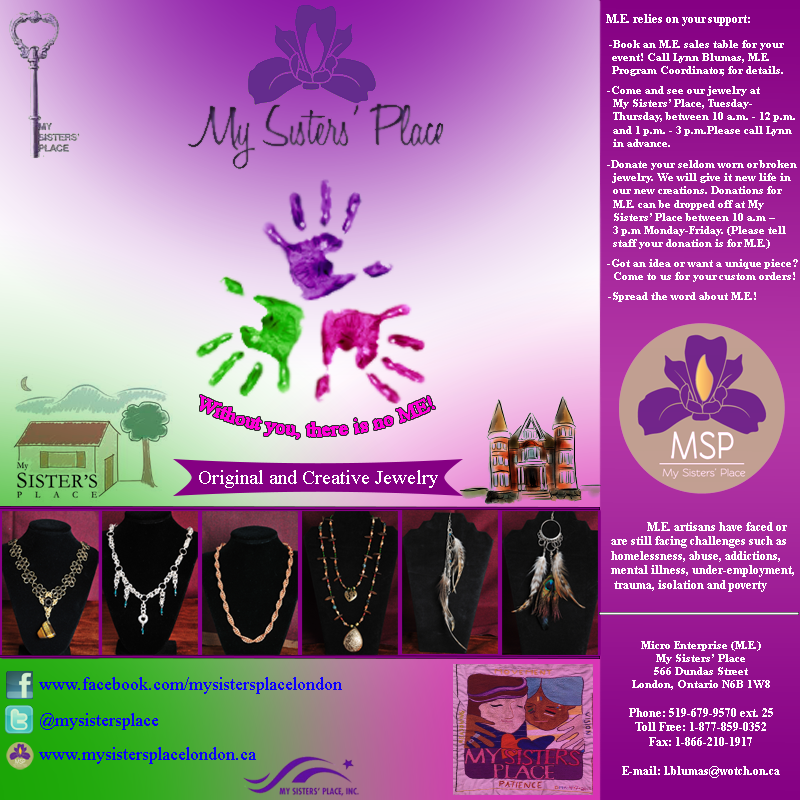
<style>
.page{position:relative;width:800px;height:800px}
.page>*{position:absolute;margin:0}
.t1{font:12px "TimesNewRomanPS-BoldMT";color:#ffffff}
.t2{font:11px "TimesNewRomanPS-BoldMT";color:#ffffff}
.t3{font:20px "TimesNewRomanPSMT";color:#ff00d8}
.t4{font:20px "TimesNewRomanPSMT";color:#ffffff}
.t5{font:18px "TimesNewRomanPSMT";color:#0c00ff}
</style>
<div class="page">
<p class="t1" style="left:606px;top:14px;width:144px;height:12px">M.E. relies on your support:</p>
<p class="t2" style="left:609px;top:40px;width:175px;height:36px">-Book an M.E. sales table for your<br> event! Call Lynn Blumas, M.E. <br> Program Coordinator, for details.</p>
<p class="t2" style="left:607px;top:86px;width:188px;height:61px">-Come and see our jewelry at <br>  My Sisters’ Place, Tuesday-<br>  Thursday, between 10 a.m. - 12 p.m. <br>  and 1 p.m. - 3 p.m.Please call Lynn <br>  in advance.</p>
<p class="t2" style="left:607px;top:160px;width:190px;height:89px">-Donate your seldom worn or broken<br>  jewelry. We will give it new life in <br>  our new creations. Donations for <br>  M.E. can be dropped off at My <br>  Sisters’ Place between 10 a.m – <br>  3 p.m Monday-Friday. (Please tell <br>  staff your donation is for M.E.)</p>
<p class="t2" style="left:607px;top:259px;width:191px;height:23px">-Got an idea or want a unique piece?<br>  Come to us for your custom orders!</p>
<p class="t2" style="left:608px;top:292px;width:148px;height:10px">-Spread the word about M.E.!</p>
<p class="t3" style="left:200px;top:395px;width:235px;height:44px">Without you, there is no ME!</p>
<p class="t4" style="left:199px;top:470px;width:239px;height:18px">Original and Creative Jewelry</p>
<p class="t1" style="left:611px;top:522px;width:183px;height:70px">M.E. artisans have faced or <br>are still facing challenges such as<br>homelessness, abuse, addictions, <br>mental illness, under-employment,<br> trauma, isolation and poverty</p>
<p class="t1" style="left:622px;top:641px;width:158px;height:137px;text-align:center"><span class="t2">Micro Enterprise (M.E.)<br>My Sisters’ Place<br>566 Dundas Street<br>London, Ontario N6B 1W8<br></span><br>Phone: 519-679-9570 ext. 25<br>Toll Free: 1-877-859-0352<br>Fax: 1-866-210-1917<br><br>E-mail: l.blumas@wotch.on.ca</p>
<p class="t5" style="left:39px;top:677px;width:303px;height:17px">www.facebook.com/mysistersplacelondon</p>
<p class="t5" style="left:40px;top:713px;width:118px;height:17px">@mysistersplace</p>
<p class="t5" style="left:39px;top:747px;width:217px;height:17px">www.mysistersplacelondon.ca</p>
</div>
